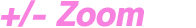
<style>
.page{position:relative;width:196px;height:28px;background:#ffffff}
.page>*{position:absolute;margin:0}
.t1{font:32px "RodinPro-EB";letter-spacing:-0.046em;color:#f880de;font-style:italic}
</style>
<div class="page">
<p class="t1" style="left:0px;top:0px;width:144px;height:27px">+/- Zoom</p>
</div>
